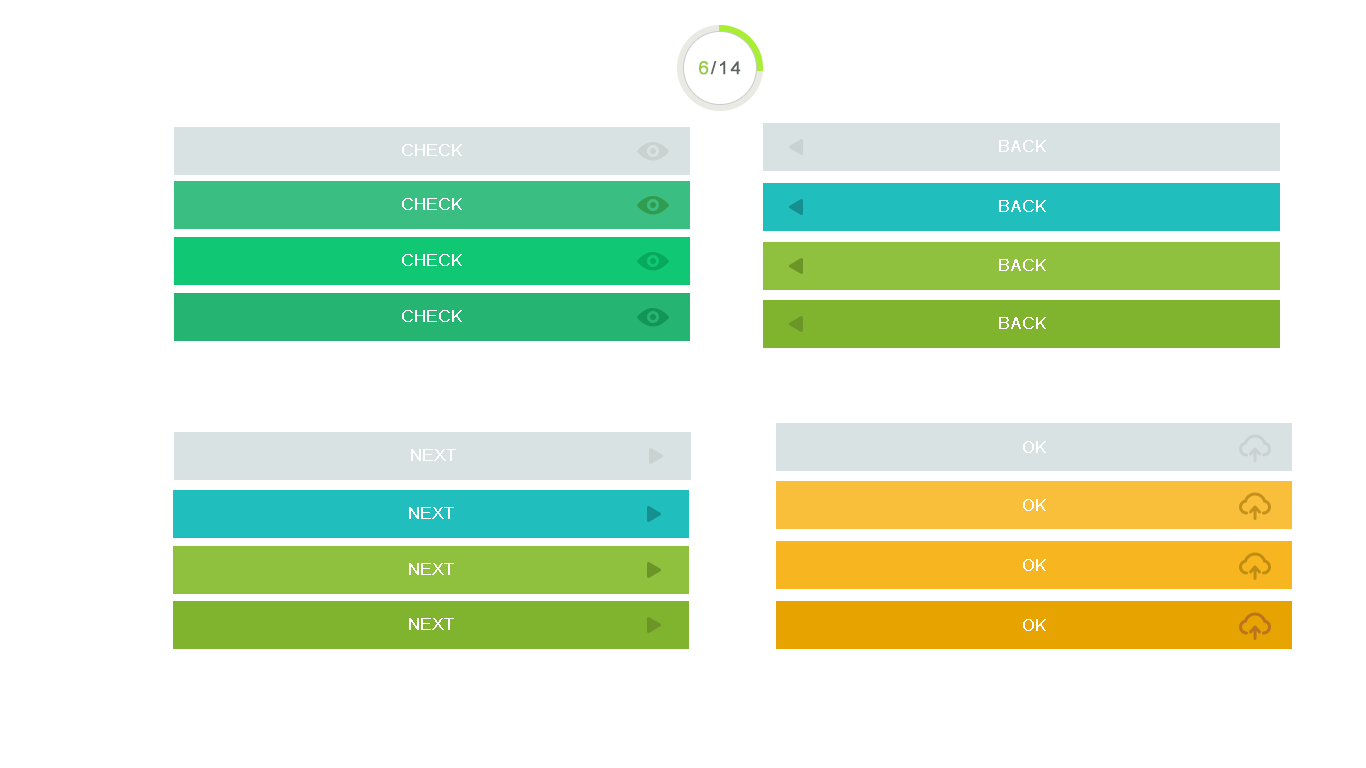
<style>
.page{position:relative;width:1366px;height:768px;background:#ffffff}
.page>*{position:absolute;margin:0}
.t1{font:18px "ArialMT";letter-spacing:0.1em;color:#5d6363;font-weight:bold}
.t2{font:18px "ArialMT";letter-spacing:0.1em;color:#96c745;font-weight:bold}
.t3{font:16px "ArialMT";color:#ffffff;text-transform:uppercase;font-weight:bold}
</style>
<div class="page">
<p class="t1" style="left:699px;top:61px;width:42px;height:14px"><span class="t2">6</span>/14</p>
<p class="t3" style="left:402px;top:144px;width:60px;height:12px">Check</p>
<p class="t3" style="left:999px;top:140px;width:47px;height:12px">back</p>
<p class="t3" style="left:402px;top:198px;width:60px;height:12px">Check</p>
<p class="t3" style="left:999px;top:200px;width:47px;height:12px">back</p>
<p class="t3" style="left:402px;top:254px;width:60px;height:12px">Check</p>
<p class="t3" style="left:999px;top:259px;width:47px;height:12px">back</p>
<p class="t3" style="left:402px;top:310px;width:60px;height:12px">Check</p>
<p class="t3" style="left:999px;top:317px;width:47px;height:12px">back</p>
<p class="t3" style="left:411px;top:449px;width:45px;height:12px">NEXT</p>
<p class="t3" style="left:1023px;top:441px;width:23px;height:12px">ok</p>
<p class="t3" style="left:409px;top:507px;width:45px;height:12px">next</p>
<p class="t3" style="left:1023px;top:499px;width:23px;height:12px">ok</p>
<p class="t3" style="left:409px;top:563px;width:45px;height:12px">next</p>
<p class="t3" style="left:1023px;top:559px;width:23px;height:12px">ok</p>
<p class="t3" style="left:409px;top:618px;width:45px;height:12px">next</p>
<p class="t3" style="left:1023px;top:619px;width:23px;height:12px">ok</p>
</div>
